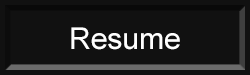
<style>
.page{position:relative;width:250px;height:75px;background:#111111}
.page>*{position:absolute;margin:0}
.t1{font:30px "ArialMT";color:#ffffff}
</style>
<div class="page">
<p class="t1" style="left:71px;top:27px;width:109px;height:23px">Resume</p>
</div>
